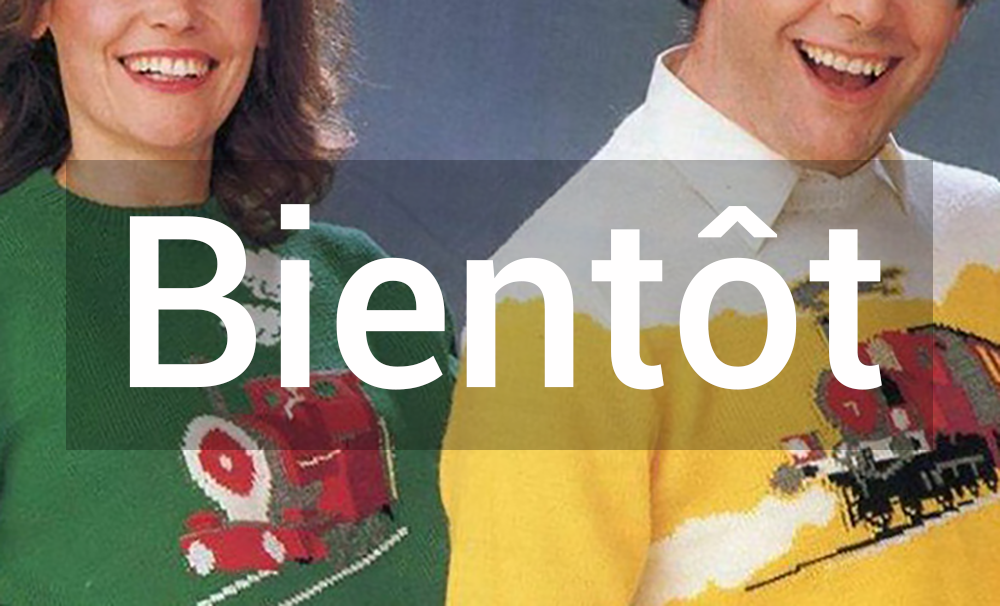
<style>
.page{position:relative;width:1000px;height:606px}
.page>*{position:absolute;margin:0}
.t1{font:240px "Roboto-Medium";color:#fffefe}
</style>
<div class="page">
<p class="t1" style="left:129px;top:204px;width:753px;height:186px">Bientôt</p>
</div>
